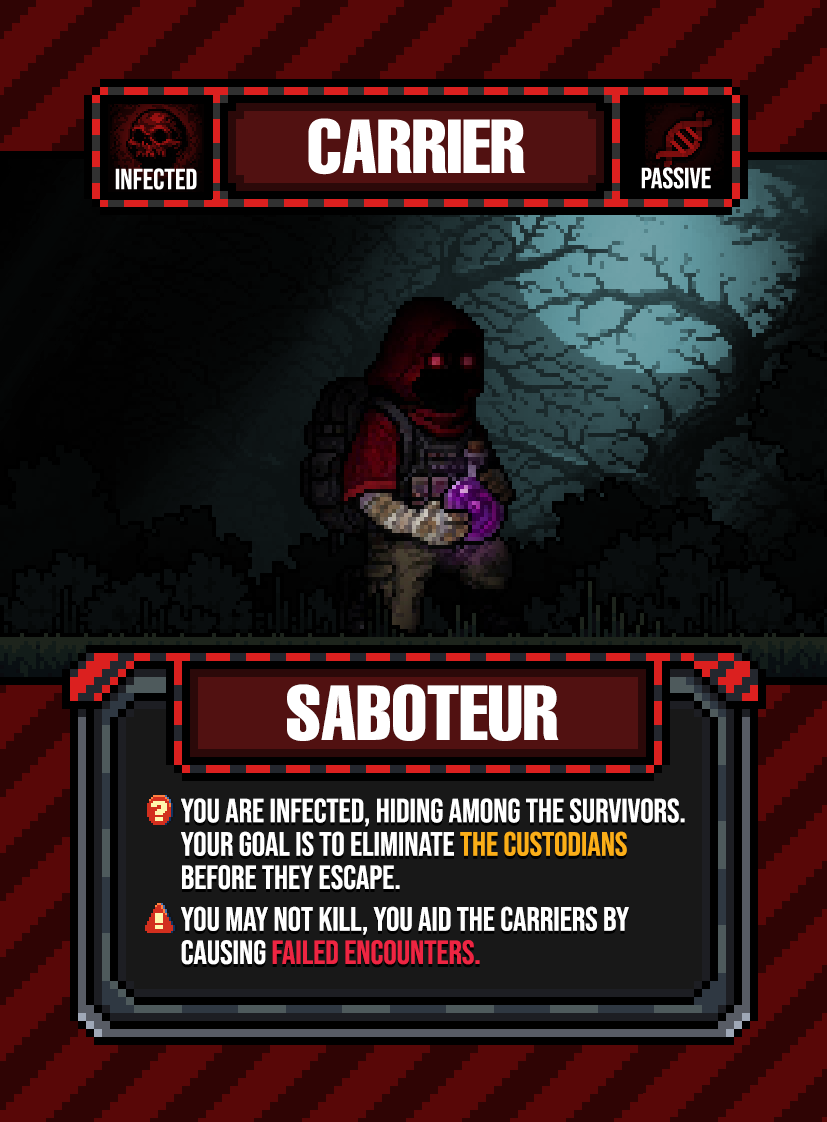
<style>
.page{position:relative;width:827px;height:1122px}
.page>*{position:absolute;margin:0}
.t1{font:76.2px "HelveticaLTPro-Compressed";color:#ffffff}
.t2{font:33.3px/33.3px "BebasNeue-Regular";color:#ffffff}
.t3{font:33.3px/33.3px "BebasNeue-Regular";color:#fbae18}
.t4{font:33.3px/41.7px "BebasNeue-Regular";color:#ffffff}
.t5{font:33.3px/29.2px "BebasNeue-Regular";color:#ffffff}
.t6{font:33.3px/33.3px "BebasNeue-Regular";color:#ee2542}
</style>
<div class="page">
<p class="t1" style="left:287px;top:684px;width:272px;height:57px">SABOTEUR</p>
<p class="t2" style="left:181px;top:798px;width:504px;height:167px">You are infected, hiding among the Survivors.<br>Your goal is to eliminate <span class="t3">the Custodians</span> before they escape.<br><span class="t4">you may not kill, </span><span class="t5">you aid </span>the CARRIERS by causing <span class="t6">failed encounters.</span></p>
</div>
